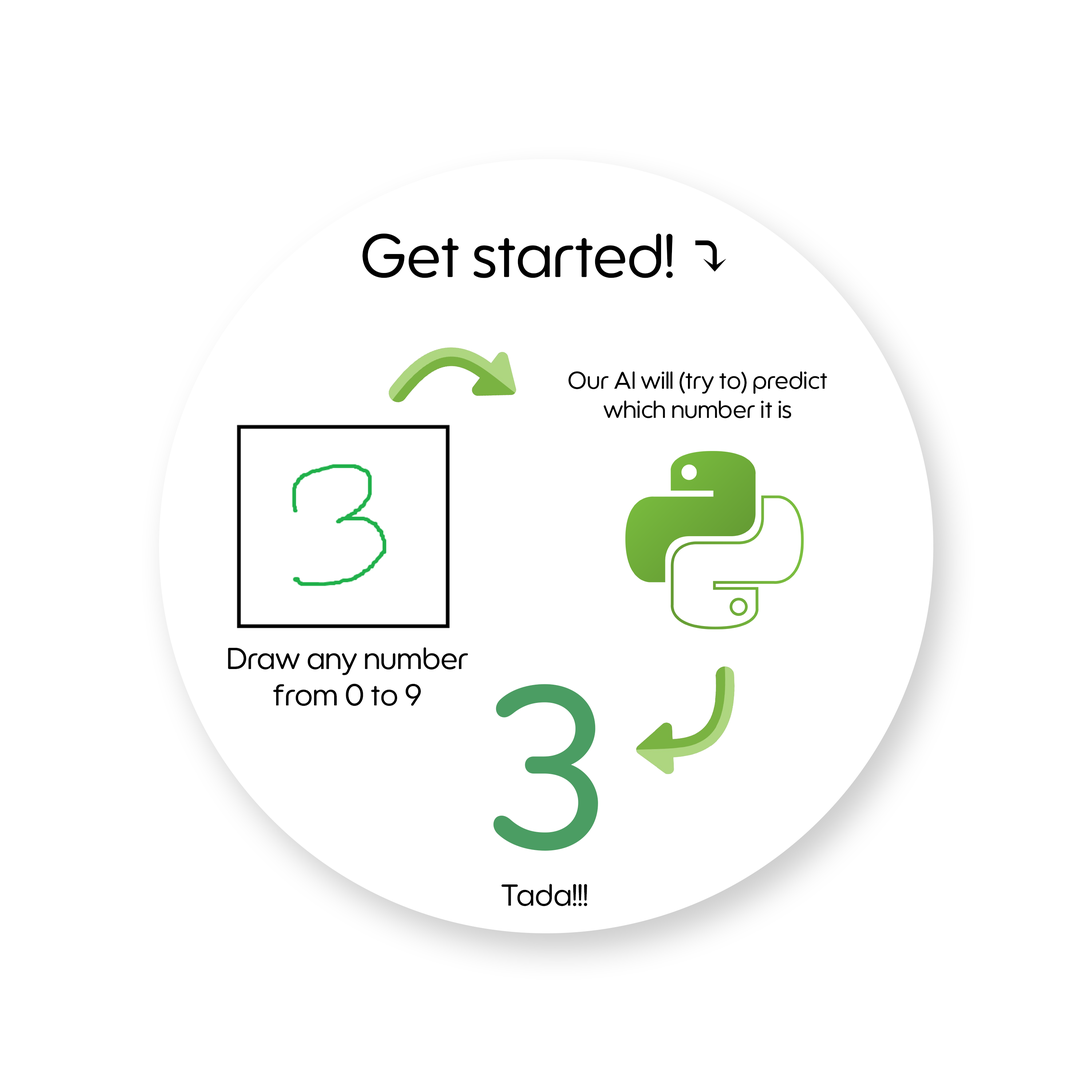
<style>
.page{position:relative;width:1092px;height:1092px;background:#ffffff}
.page>*{position:absolute;margin:0}
.t1{font:60.7px "LTSaeada-Light";color:#000000}
.t2{font:60.7px "DejaVuSerifCondensed";color:#000000}
.t3{font:24.3px "LTSaeada-Light";color:#000000}
.t4{font:30.3px "LTSaeada-Light";color:#000000}
.t5{font:227.5px "LTSaeada-Light";color:#4b9d63}
</style>
<div class="page">
<p class="t1" style="left:363px;top:233px;width:363px;height:45px">Get started! <span class="t2">⤵</span></p>
<p class="t3" style="left:568px;top:371px;width:259px;height:47px;text-align:center">Our Al will (try to) predict which number it is</p>
<p class="t4" style="left:228px;top:647px;width:240px;height:59px;text-align:center">Draw any number from 0 to 9</p>
<p class="t5" style="left:493px;top:684px;width:105px;height:167px">3</p>
<p class="t4" style="left:501px;top:884px;width:86px;height:22px">Tada!!!</p>
</div>
